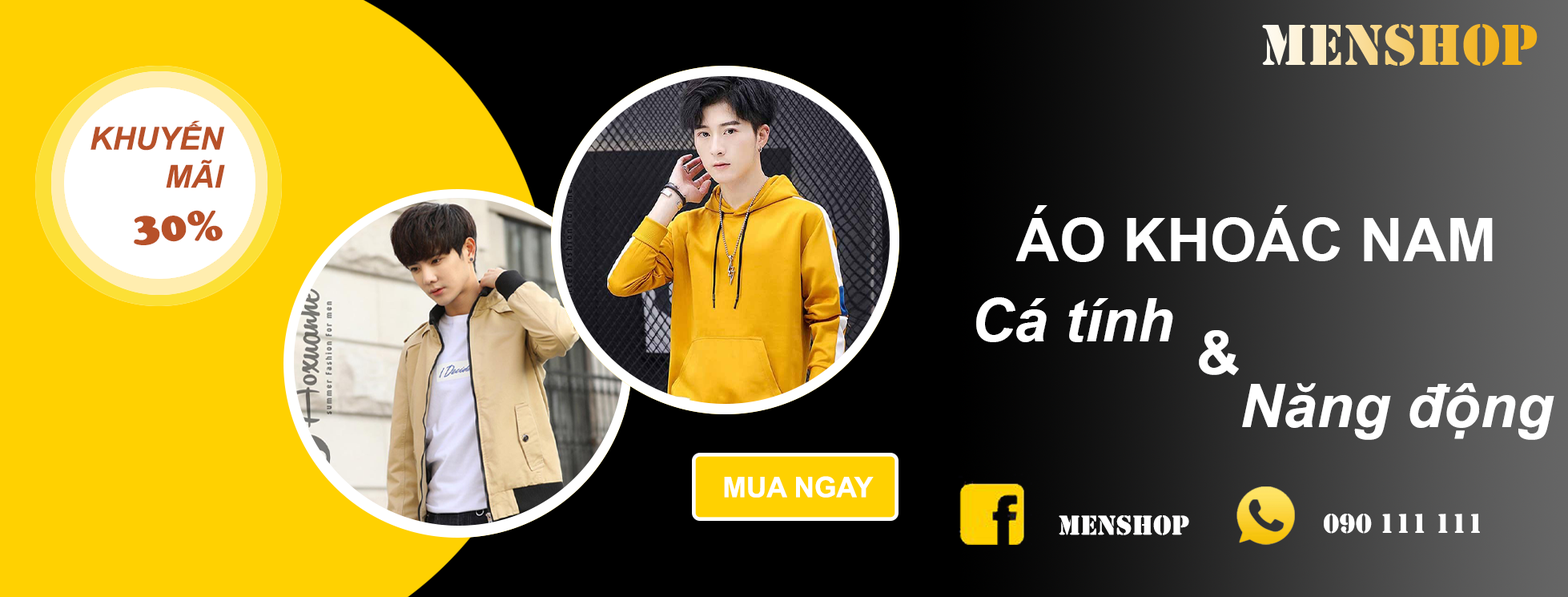
<style>
.page{position:relative;width:1568px;height:597px}
.page>*{position:absolute;margin:0}
.t1{font:31.6px "Arial-BoldItalicMT";color:#b75129}
.t2{font:44.2px "CooperBlack";color:#b75129}
.t3{font:60.1px "Arial-BoldMT";color:#ffffff}
.t4{font:60.1px "Arial-BoldItalicMT";color:#ffffff}
.t5{font:28.3px "Arial-BoldMT";color:#ffffff}
.t6{font:28.3px "Stencil";color:#ffffff}
</style>
<div class="page">
<p class="t1" style="left:90px;top:120px;width:135px;height:125px;text-align:right">KHUYẾN<br>MÃI <br><span class="t2">30%</span></p>
<p class="t3" style="left:1016px;top:205px;width:477px;height:57px">ÁO KHOÁC NAM</p>
<p class="t4" style="left:976px;top:297px;width:197px;height:45px">Cá tính</p>
<p class="t3" style="left:1199px;top:330px;width:40px;height:46px">&amp;</p>
<p class="t4" style="left:1242px;top:383px;width:312px;height:57px">Năng động</p>
<p class="t5" style="left:724px;top:476px;width:150px;height:21px">MUA NGAY</p>
<p class="t6" style="left:1059px;top:515px;width:130px;height:20px">MENSHOP</p>
<p class="t6" style="left:1324px;top:513px;width:156px;height:20px">090 111 111</p>
</div>
